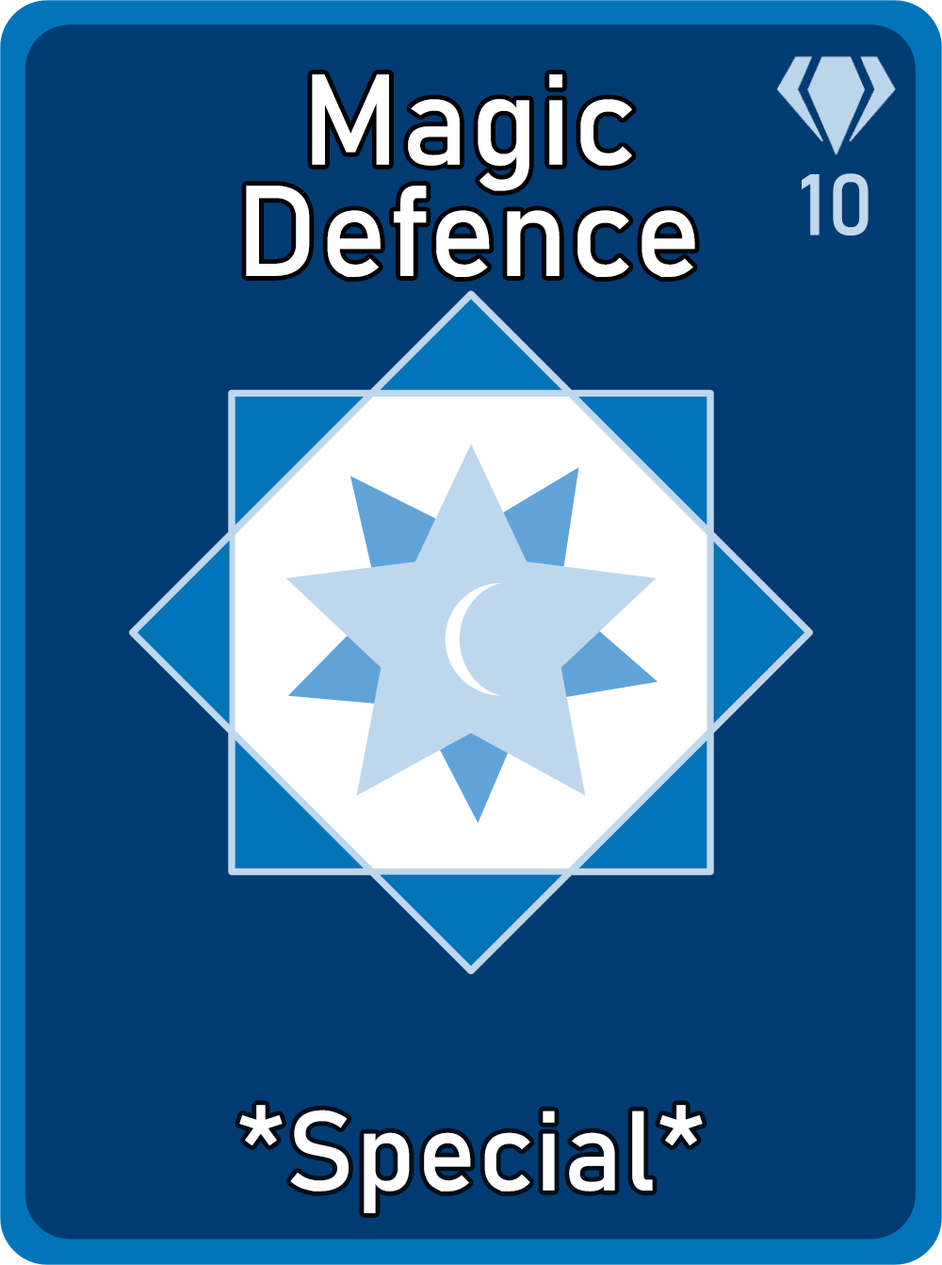
<style>
.page{position:relative;width:942px;height:1265px;background:#003b73}
.page>*{position:absolute;margin:0}
.t1{font:126.7px/111.3px "Bahnschrift";letter-spacing:0.01em;color:#ffffff}
.t2{font:85px "Bahnschrift";letter-spacing:0.01em;color:#c1d8ed}
.t3{font:111.3px "Bahnschrift";letter-spacing:0.01em;color:#ffffff}
</style>
<div class="page">
<p class="t1" style="left:246px;top:74px;width:449px;height:203px;text-align:center">Magic<br>Defence</p>
<p class="t2" style="left:802px;top:173px;width:67px;height:63px">10</p>
<p class="t3" style="left:239px;top:1105px;width:464px;height:109px">*Special*</p>
</div>
